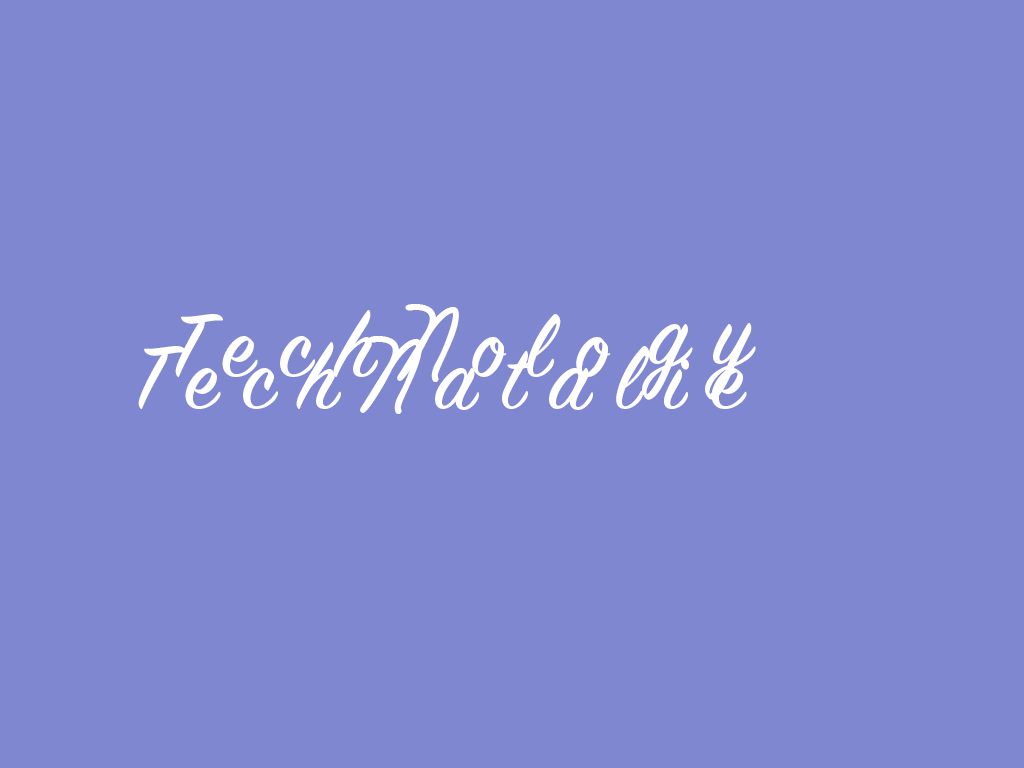
<style>
.page{position:relative;width:1024px;height:768px;background:#7f87d0}
.page>*{position:absolute;margin:0}
.t1{font:100px "SignPainter-HouseScript";letter-spacing:0.26em;color:#ffffff}
.t2{font:72px "SignPainter-HouseScript";color:#363639}
.t3{font:100px "Rebecca";letter-spacing:0.26em;color:#ffffff}
.t4{font:100px "SignPainter-HouseScript";color:#ffffff}
</style>
<div class="page">
<p class="t1" style="left:175px;top:304px;width:436px;height:78px"><span class="t2"><br><br><br><br><br><br><br><br><br><br><br></span>Tech<span class="t3">N</span><span class="t4">o </span>lo</p>
<p class="t1" style="left:642px;top:323px;width:114px;height:77px"><span class="t2"><br><br><br><br><br><br><br><br><br><br><br></span>gy</p>
<p class="t1" style="left:138px;top:336px;width:609px;height:78px"><span class="t2"><br><br><br><br><br><br><br><br><br><br><br></span>Tech<span class="t3">N</span>atalie</p>
</div>
